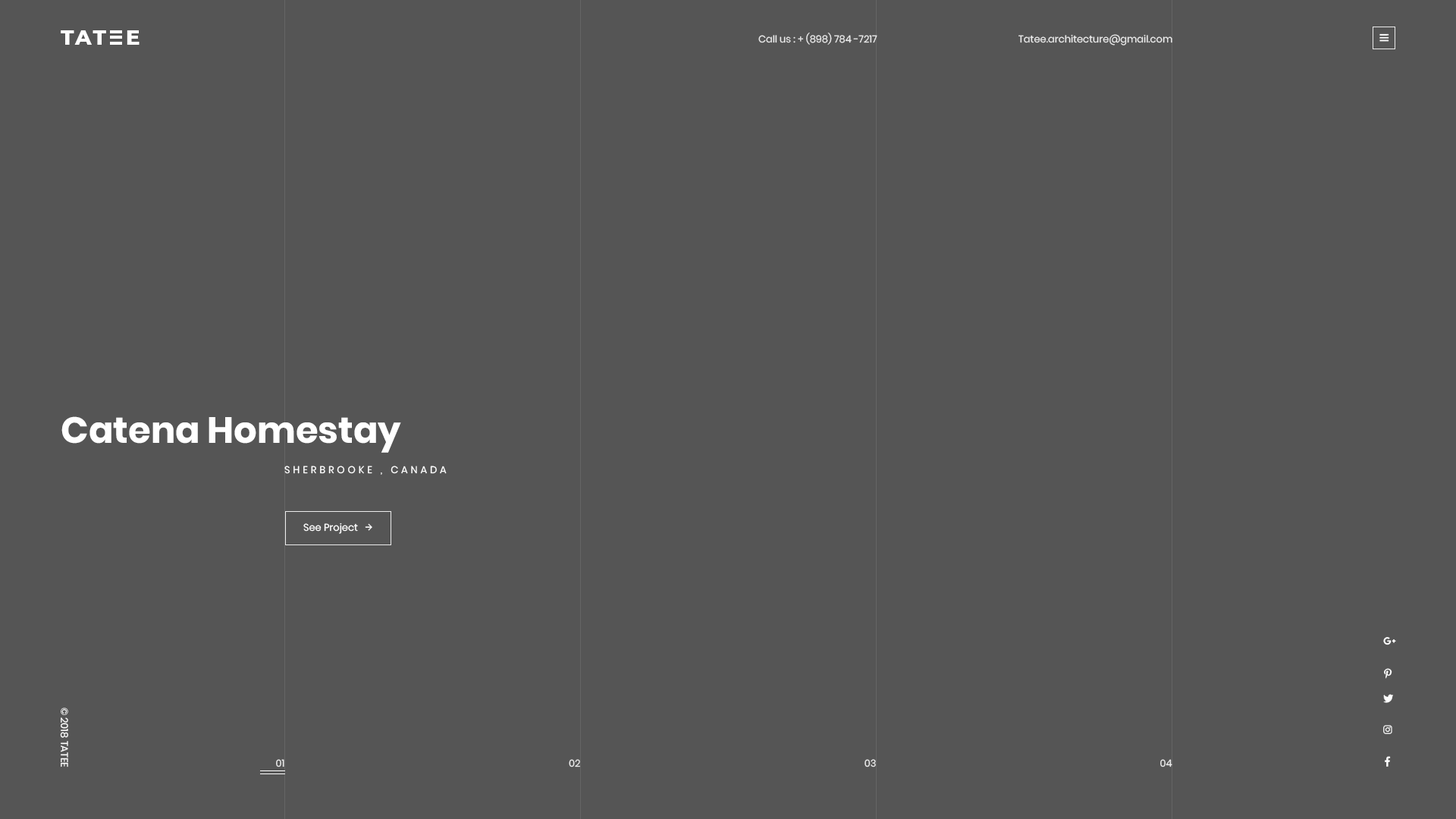
<style>
.page{position:relative;width:1456px;height:819px;background:#555555}
.page>*{position:absolute;margin:0}
.t1{font:20.9px "Montserrat-ExtraBold";letter-spacing:0.1em;color:#ffffff;text-transform:uppercase}
.t2{font:9.9px "Poppins-Regular";color:#ebebeb}
.t3{font:36.4px "Poppins-Bold";color:#ffffff}
.t4{font:9.9px "Poppins-Regular";letter-spacing:0.3em;color:#ffffff;text-transform:uppercase}
.t5{font:9.9px "Poppins-Regular";color:#ffffff}
.t6{font:9.9px "Poppins-Regular";color:#ebebeb;text-transform:uppercase}
</style>
<div class="page">
<p class="t1" style="left:61px;top:30px;width:45px;height:15px">tat</p>
<p class="t1" style="left:127px;top:30px;width:13px;height:15px">e</p>
<p class="t2" style="left:758px;top:33px;width:119px;height:12px">Call us : + (898) 784 -7217</p>
<p class="t2" style="left:1018px;top:34px;width:154px;height:11px">Tatee.architecture@gmail.com</p>
<p class="t3" style="left:61px;top:416px;width:340px;height:37px">Catena Homestay</p>
<p class="t4" style="left:284px;top:466px;width:163px;height:9px">Sherbrooke , Canada</p>
<p class="t5" style="left:303px;top:522px;width:55px;height:12px">See Project</p>
<p class="t5" style="left:60px;top:708px;width:8px;height:59px;rotate:90deg">© 2018 TATEE</p>
<p class="t2" style="left:276px;top:759px;width:8px;height:8px">01</p>
<p class="t6" style="left:569px;top:759px;width:11px;height:8px">02</p>
<p class="t6" style="left:864px;top:759px;width:12px;height:8px">03</p>
<p class="t6" style="left:1160px;top:759px;width:12px;height:8px">04</p>
</div>
